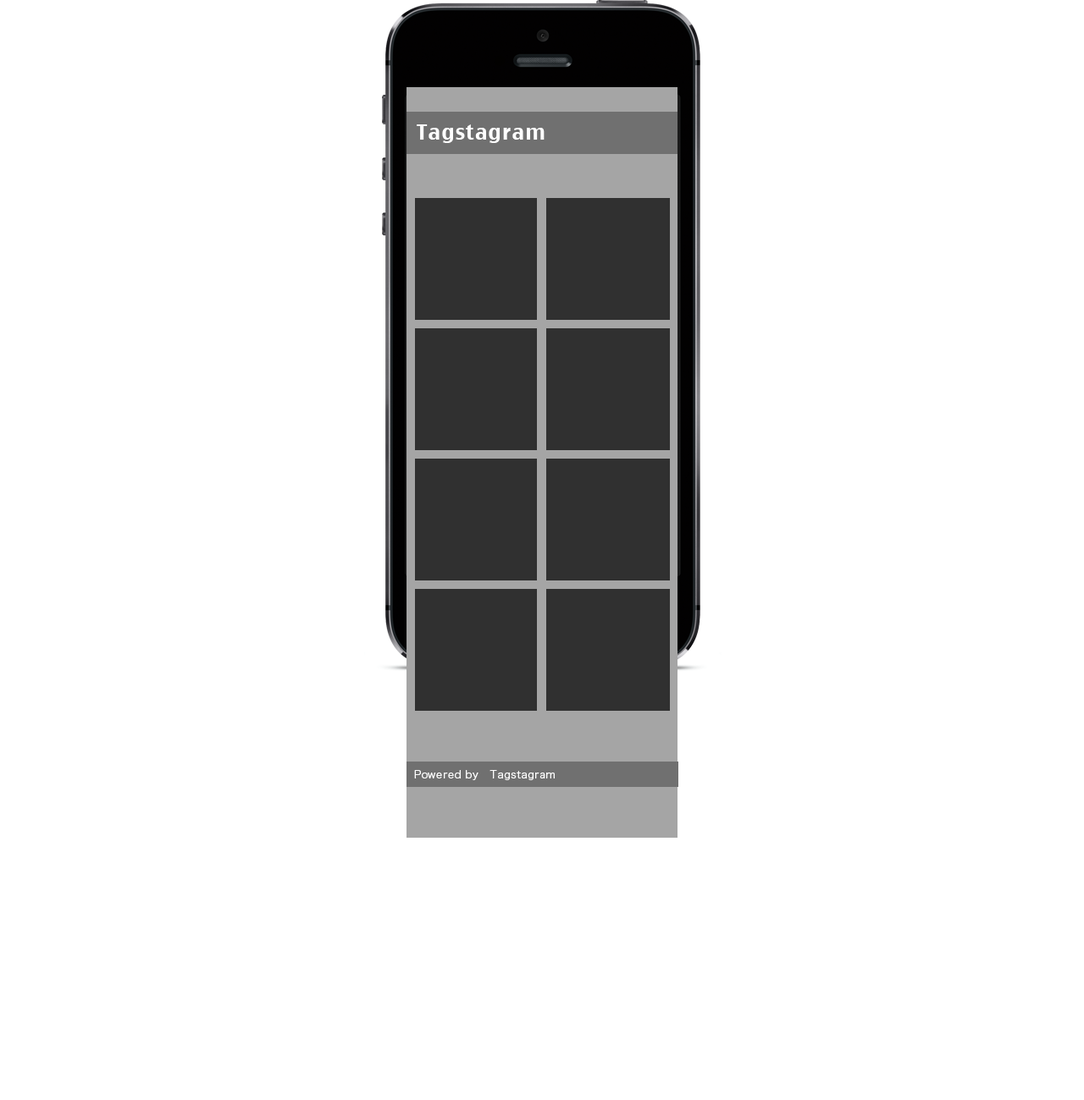
<style>
.page{position:relative;width:1084px;height:1100px;background:#ffffff}
.page>*{position:absolute;margin:0}
.t1{font:20.3px "CharcoalCY";letter-spacing:0.05em;color:#ffffff}
.t2{font:10.2px "HiraKakuPro-W3";letter-spacing:0.05em;color:#ffffff}
</style>
<div class="page">
<p class="t1" style="left:416px;top:124px;width:128px;height:19px">Tagstagram</p>
<p class="t2" style="left:414px;top:770px;width:140px;height:10px">Powered by   Tagstagram</p>
</div>
